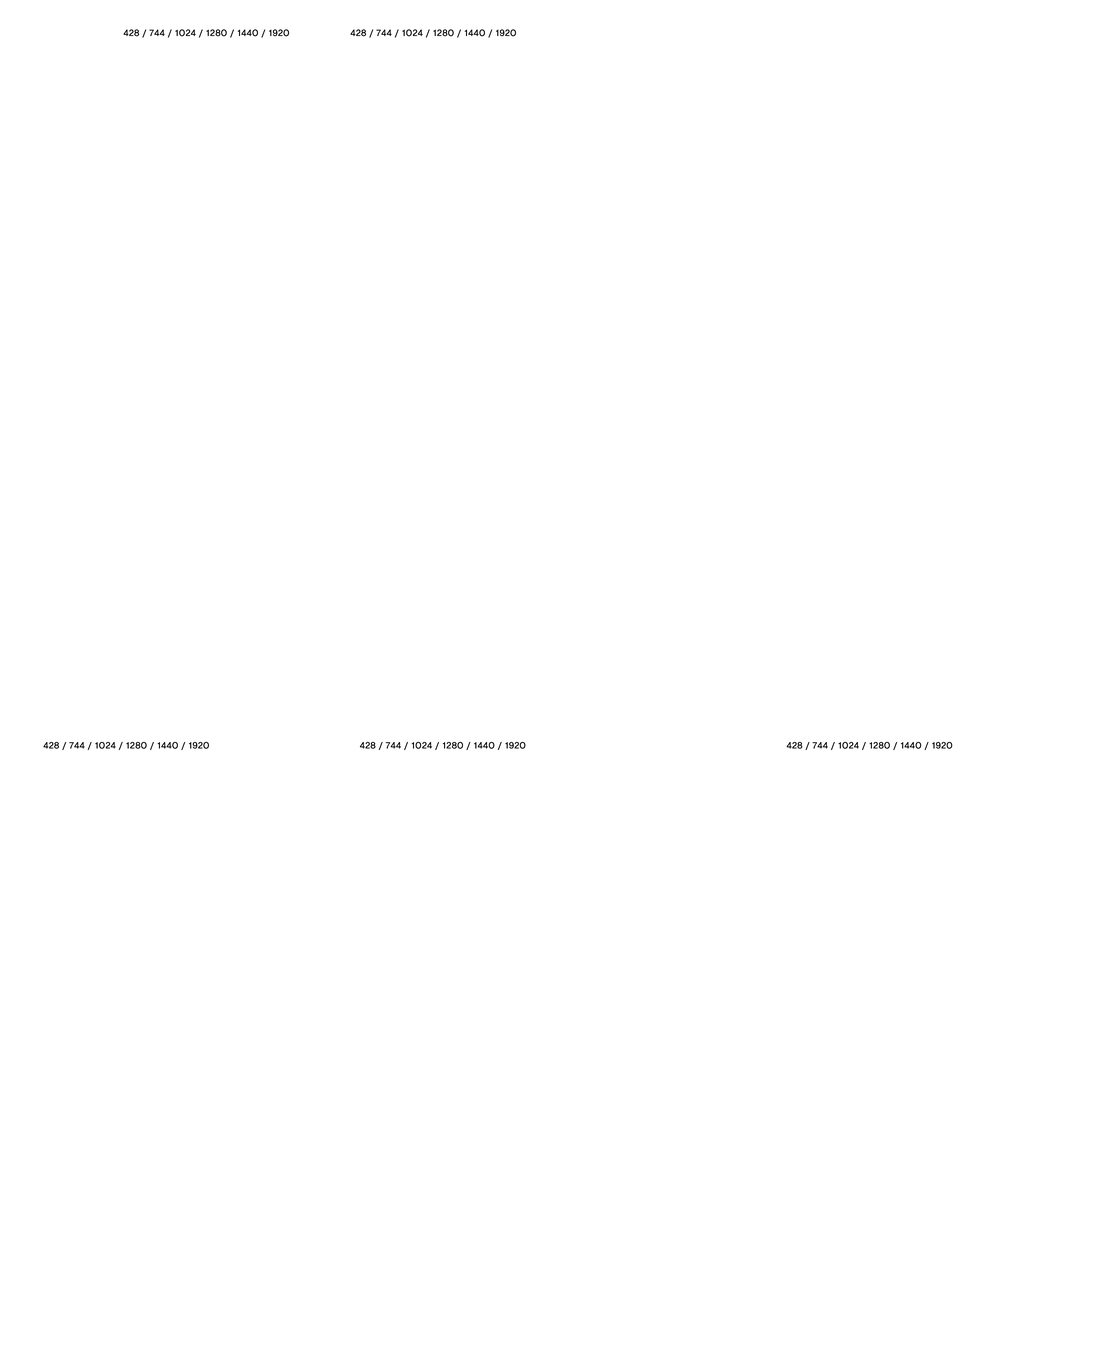
<style>
.page{position:relative;width:1106px;height:1370px;background:#ffffff}
.page>*{position:absolute;margin:0}
.t1{font:9px "HaanYGodic24";letter-spacing:-0.025em;color:#000000}
</style>
<div class="page">
<p class="t1" style="left:124px;top:29px;width:165px;height:9px">428 / 744 / 1024 / 1280 / 1440 / 1920</p>
<p class="t1" style="left:351px;top:29px;width:165px;height:9px">428 / 744 / 1024 / 1280 / 1440 / 1920</p>
<p class="t1" style="left:43px;top:742px;width:166px;height:8px">428 / 744 / 1024 / 1280 / 1440 / 1920</p>
<p class="t1" style="left:360px;top:742px;width:166px;height:8px">428 / 744 / 1024 / 1280 / 1440 / 1920</p>
<p class="t1" style="left:787px;top:742px;width:166px;height:8px">428 / 744 / 1024 / 1280 / 1440 / 1920</p>
</div>
